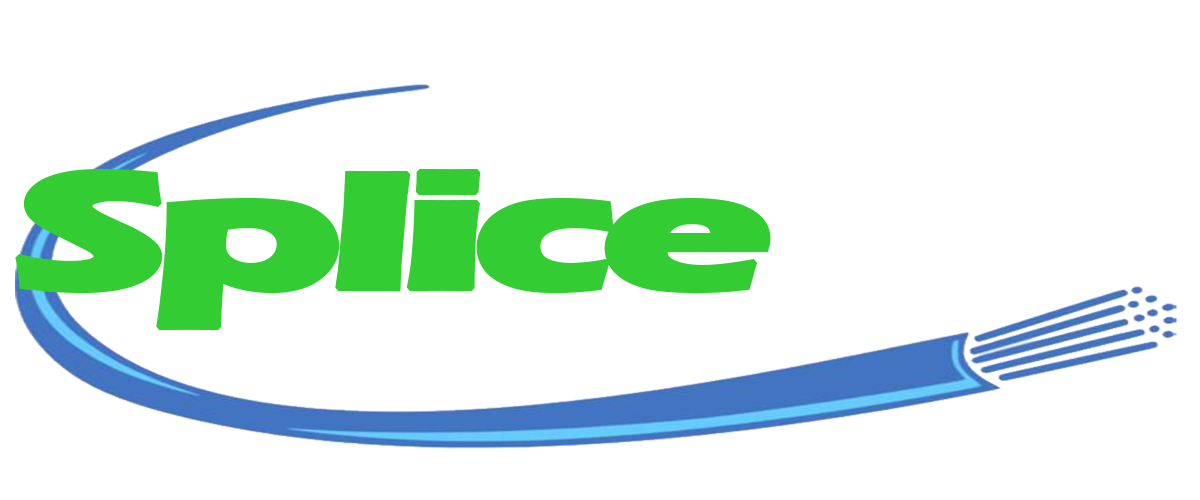
<style>
.page{position:relative;width:1200px;height:500px;background:#ffffff}
.page>*{position:absolute;margin:0}
.t1{font:171px "ErasITC-Bold";letter-spacing:-0.075em;color:#33cc33;font-weight:bold;scale:1.73 1}
</style>
<div class="page">
<p class="t1" style="left:15px;top:168px;width:756px;height:163px">Splice</p>
</div>
